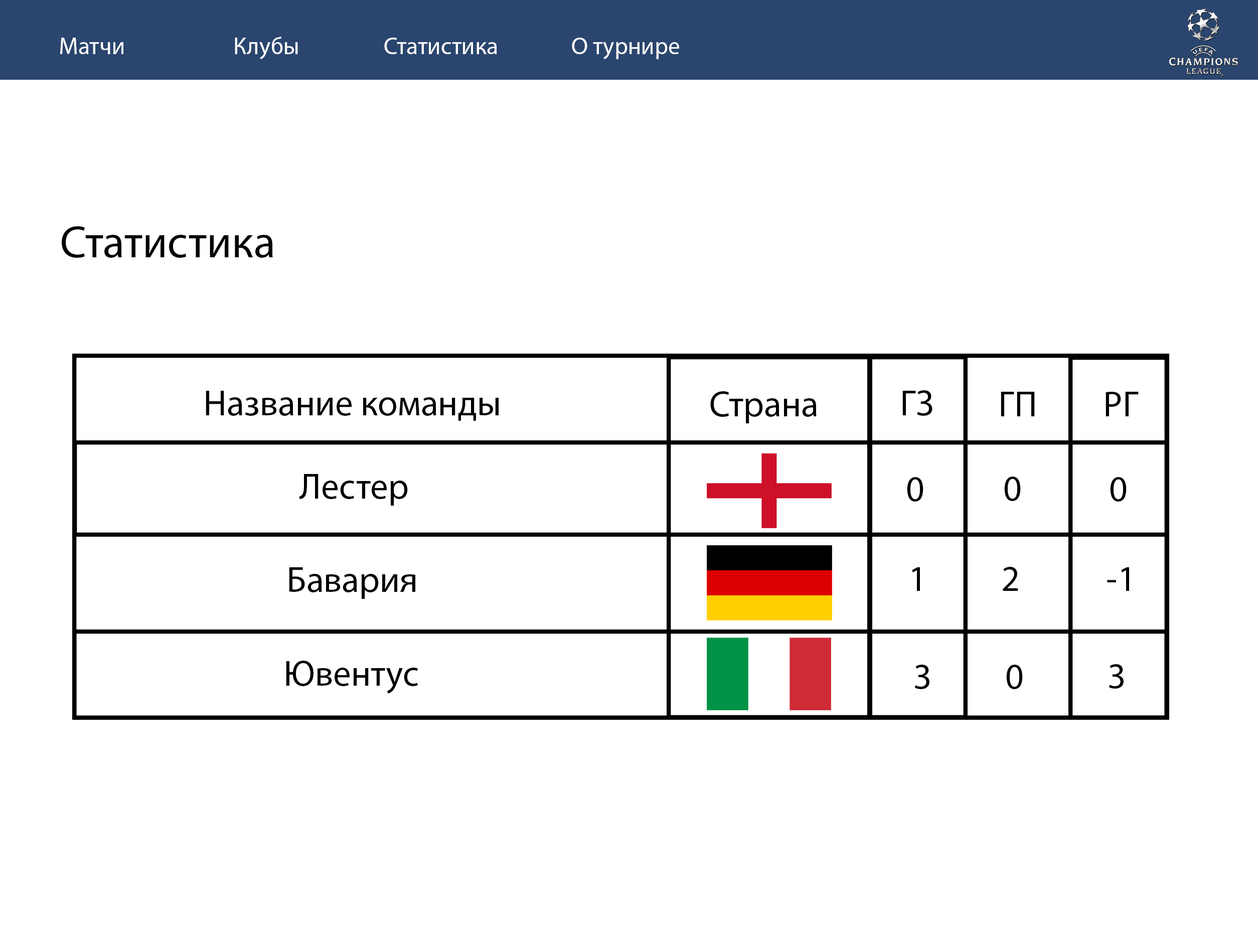
<style>
.page{position:relative;width:1258px;height:948px;background:#ffffff}
.page>*{position:absolute;margin:0}
.t1{font:24.1px "MyriadPro-Regular";color:#ffffff}
.t2{font:45.1px "MyriadPro-Regular";color:#010101}
.t3{font:36.1px "MyriadPro-Regular";color:#000000}
</style>
<div class="page">
<p class="t1" style="left:60px;top:38px;width:63px;height:16px">Матчи</p>
<p class="t1" style="left:235px;top:37px;width:63px;height:22px">Клубы</p>
<p class="t1" style="left:384px;top:38px;width:113px;height:16px">Статистика</p>
<p class="t1" style="left:572px;top:38px;width:107px;height:21px">О турнире</p>
<p class="t2" style="left:62px;top:226px;width:211px;height:32px">Статистика</p>
<p class="t3" style="left:206px;top:391px;width:293px;height:30px">Название команды</p>
<p class="t3" style="left:710px;top:391px;width:107px;height:32px">Страна</p>
<p class="t3" style="left:902px;top:390px;width:30px;height:26px">ГЗ</p>
<p class="t3" style="left:1001px;top:392px;width:34px;height:24px">ГП</p>
<p class="t3" style="left:1105px;top:392px;width:34px;height:24px">РГ</p>
<p class="t3" style="left:299px;top:474px;width:109px;height:32px">Лестер</p>
<p class="t3" style="left:907px;top:477px;width:16px;height:25px">0</p>
<p class="t3" style="left:1004px;top:476px;width:17px;height:25px">0</p>
<p class="t3" style="left:1110px;top:477px;width:17px;height:25px">0</p>
<p class="t3" style="left:289px;top:567px;width:126px;height:32px">Бавария</p>
<p class="t3" style="left:912px;top:567px;width:8px;height:24px">1</p>
<p class="t3" style="left:1003px;top:567px;width:15px;height:24px">2</p>
<p class="t3" style="left:1107px;top:567px;width:22px;height:24px">-1</p>
<p class="t3" style="left:286px;top:661px;width:132px;height:33px">Ювентус</p>
<p class="t3" style="left:914px;top:665px;width:15px;height:24px">3</p>
<p class="t3" style="left:1006px;top:665px;width:17px;height:24px">0</p>
<p class="t3" style="left:1108px;top:664px;width:15px;height:25px">3</p>
</div>
